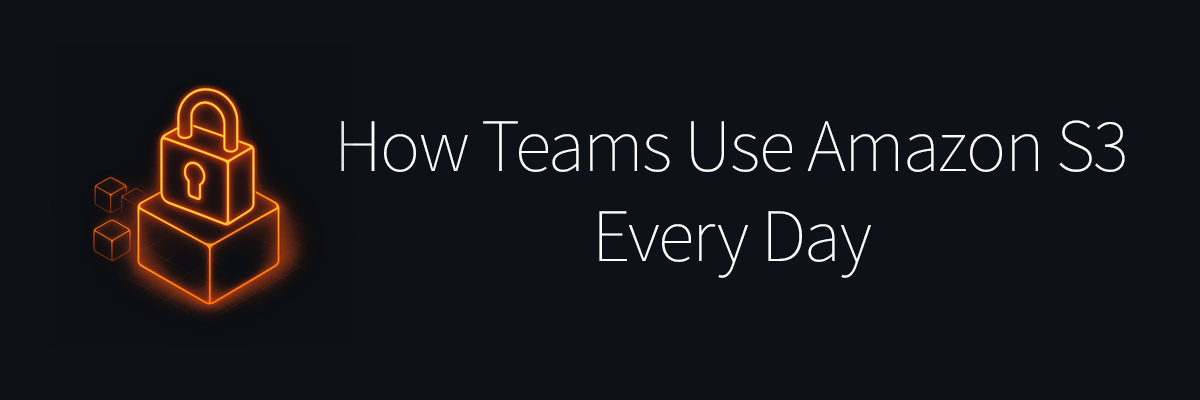
<style>
.page{position:relative;width:1200px;height:400px;background:#0e1218}
.page>*{position:absolute;margin:0}
.t1{font:75.2px "SourceSansVariable-Roman";letter-spacing:-0.02em;color:#ffffff;font-weight:bold}
</style>
<div class="page">
<p class="t1" style="left:341px;top:120px;width:784px;height:158px;text-align:center">How Teams Use Amazon S3<br>Every Day</p>
</div>
